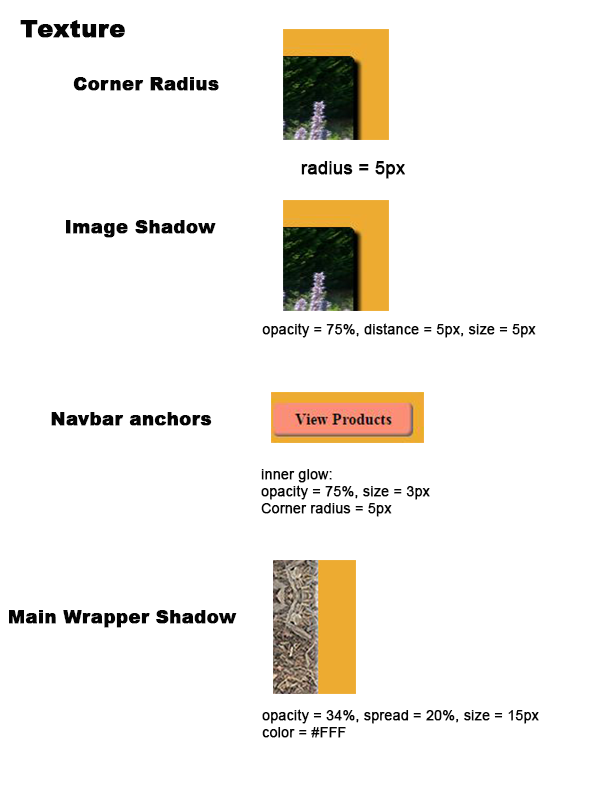
<style>
.page{position:relative;width:612px;height:792px;background:#ffffff}
.page>*{position:absolute;margin:0}
.t1{font:24px "Arial-Black";color:#040404;font-weight:bold}
.t2{font:18px "Arial-Black";color:#040404;font-weight:bold}
.t3{font:18px "ArialMT";color:#040404;font-weight:bold}
.t4{font:14px "ArialMT";color:#040404;font-weight:bold}
</style>
<div class="page">
<p class="t1" style="left:20px;top:20px;width:105px;height:18px">Texture</p>
<p class="t2" style="left:73px;top:77px;width:146px;height:14px">Corner Radius</p>
<p class="t3" style="left:301px;top:161px;width:104px;height:18px">radius = 5px</p>
<p class="t2" style="left:66px;top:220px;width:150px;height:18px">Image Shadow</p>
<p class="t4" style="left:262px;top:323px;width:274px;height:15px">opacity = 75%, distance = 5px, size = 5px</p>
<p class="t2" style="left:51px;top:412px;width:161px;height:14px">Navbar anchors</p>
<p class="t4" style="left:261px;top:469px;width:169px;height:48px">inner glow:<br>opacity = 75%, size = 3px<br>Corner radius = 5px</p>
<p class="t2" style="left:9px;top:610px;width:228px;height:18px">Main Wrapper Shadow</p>
<p class="t4" style="left:262px;top:709px;width:277px;height:29px">opacity = 34%, spread = 20%, size = 15px<br>color = #FFF</p>
</div>
